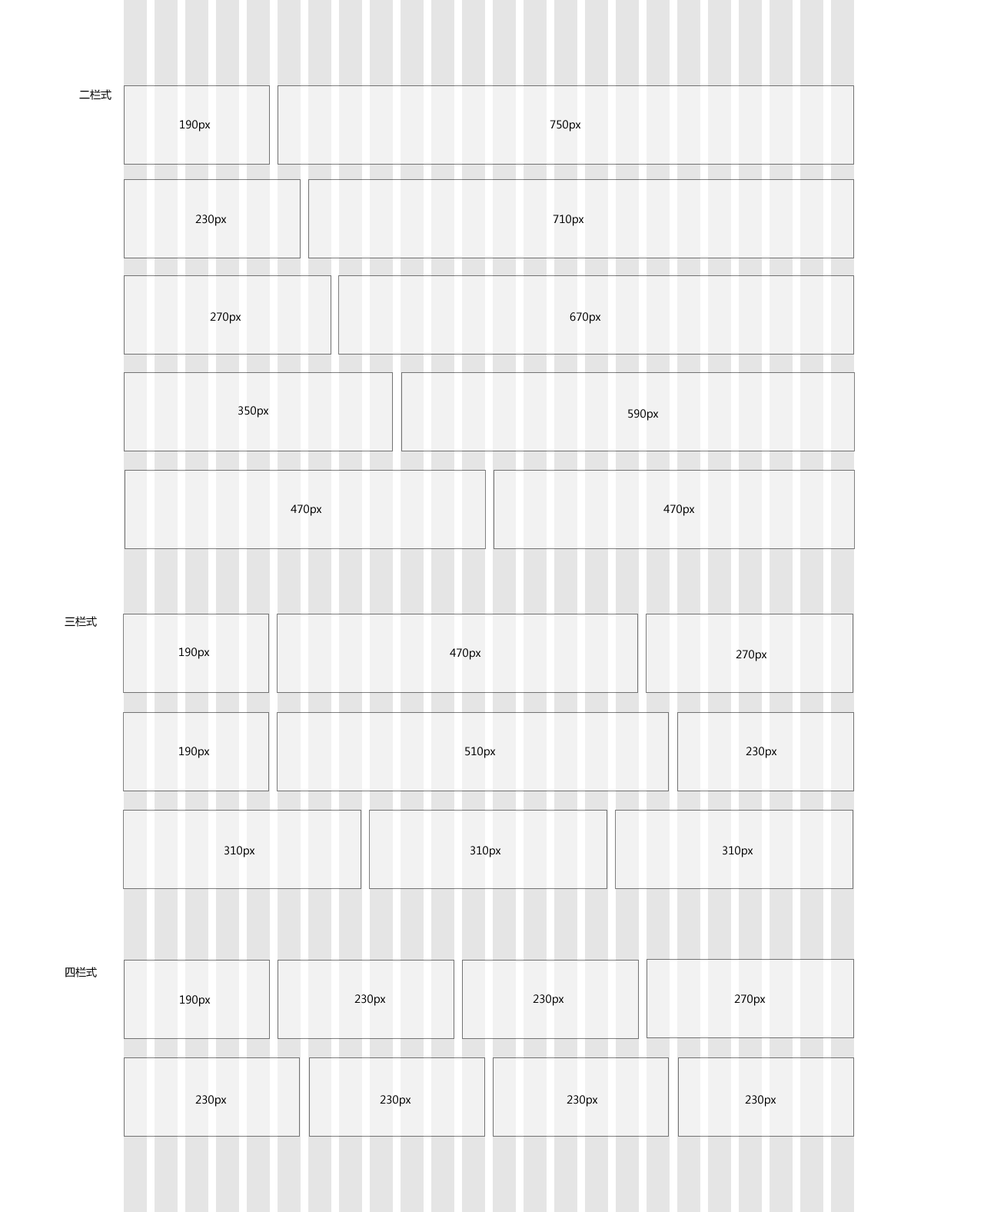
<style>
.page{position:relative;width:984px;height:1212px;background:#f2f2f2}
.page>*{position:absolute;margin:0}
.t1{font:10.8px "MicrosoftYaHei";color:#000000}
</style>
<div class="page">
<p class="t1" style="left:79px;top:89px;width:32px;height:11px">二栏式</p>
<p class="t1" style="left:180px;top:120px;width:31px;height:11px">190px</p>
<p class="t1" style="left:550px;top:120px;width:31px;height:11px">750px</p>
<p class="t1" style="left:195px;top:215px;width:32px;height:11px">230px</p>
<p class="t1" style="left:553px;top:215px;width:31px;height:11px">710px</p>
<p class="t1" style="left:210px;top:312px;width:31px;height:12px">270px</p>
<p class="t1" style="left:570px;top:312px;width:31px;height:12px">670px</p>
<p class="t1" style="left:238px;top:406px;width:31px;height:11px">350px</p>
<p class="t1" style="left:628px;top:409px;width:31px;height:12px">590px</p>
<p class="t1" style="left:291px;top:504px;width:31px;height:12px">470px</p>
<p class="t1" style="left:664px;top:504px;width:31px;height:12px">470px</p>
<p class="t1" style="left:65px;top:616px;width:32px;height:11px">三栏式</p>
<p class="t1" style="left:179px;top:647px;width:31px;height:12px">190px</p>
<p class="t1" style="left:450px;top:648px;width:31px;height:12px">470px</p>
<p class="t1" style="left:736px;top:650px;width:31px;height:11px">270px</p>
<p class="t1" style="left:179px;top:747px;width:31px;height:11px">190px</p>
<p class="t1" style="left:465px;top:747px;width:31px;height:11px">510px</p>
<p class="t1" style="left:746px;top:747px;width:31px;height:11px">230px</p>
<p class="t1" style="left:225px;top:846px;width:30px;height:11px">310px</p>
<p class="t1" style="left:471px;top:846px;width:30px;height:11px">310px</p>
<p class="t1" style="left:723px;top:846px;width:30px;height:11px">310px</p>
<p class="t1" style="left:65px;top:966px;width:32px;height:11px">四栏式</p>
<p class="t1" style="left:180px;top:995px;width:31px;height:11px">190px</p>
<p class="t1" style="left:354px;top:994px;width:32px;height:12px">230px</p>
<p class="t1" style="left:533px;top:994px;width:31px;height:12px">230px</p>
<p class="t1" style="left:734px;top:994px;width:32px;height:12px">270px</p>
<p class="t1" style="left:195px;top:1095px;width:32px;height:11px">230px</p>
<p class="t1" style="left:380px;top:1095px;width:31px;height:11px">230px</p>
<p class="t1" style="left:567px;top:1095px;width:31px;height:11px">230px</p>
<p class="t1" style="left:745px;top:1095px;width:32px;height:11px">230px</p>
</div>
